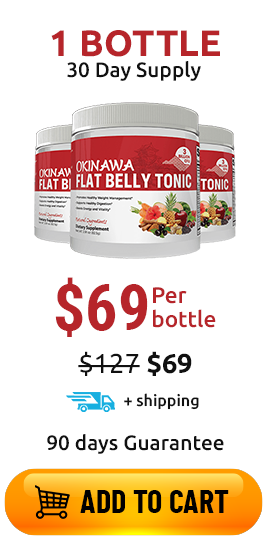
<style>
.page{position:relative;width:270px;height:560px;background:#ffffff}
.page>*{position:absolute;margin:0}
.t1{font:36.8px "Ubuntu-Bold";color:#b6252a}
.t2{font:20.8px "Ubuntu-Medium";color:#101010}
.t3{font:64px "RobotoCondensed-Bold";color:#b6252a}
.t4{font:22.4px/24px "Ubuntu-Medium";color:#b6252a}
.t5{font:27.2px "Ubuntu-Regular";color:#101010}
.t6{font:27.2px "Ubuntu-Bold";color:#101010}
.t7{font:16px "Ubuntu-Medium";color:#101010}
.t8{font:32px "BarlowCondensed-Bold";color:#010000;text-transform:uppercase}
</style>
<div class="page">
<p class="t1" style="left:51px;top:30px;width:169px;height:27px">1 BOTTLE</p>
<p class="t2" style="left:67px;top:61px;width:134px;height:20px">30 Day Supply</p>
<p class="t3" style="left:55px;top:277px;width:93px;height:60px">$69</p>
<p class="t4" style="left:153px;top:287px;width:63px;height:41px">Per<br>bottle</p>
<p class="t5" style="left:78px;top:351px;width:114px;height:25px">$127<span class="t6"> $69</span></p>
<p class="t7" style="left:124px;top:393px;width:75px;height:17px">+ shipping</p>
<p class="t2" style="left:47px;top:434px;width:177px;height:20px">90 days Guarantee</p>
<p class="t8" style="left:80px;top:490px;width:149px;height:23px">Add to cart</p>
</div>
